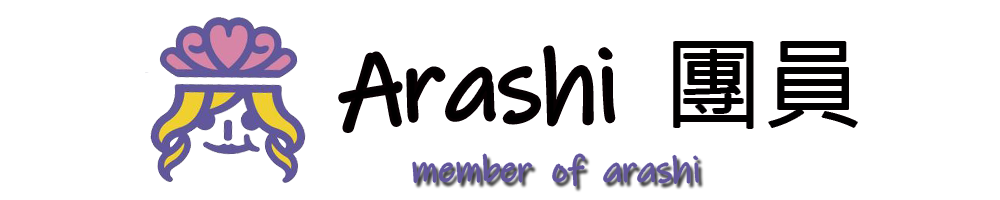
<style>
.page{position:relative;width:1000px;height:200px;background:#ffffff}
.page>*{position:absolute;margin:0}
.t1{font:100px "InkFree";color:#000000}
.t2{font:100px "MicrosoftJhengHeiRegular";color:#000000}
.t3{font:36px "InkFree";color:#64569a}
</style>
<div class="page">
<p class="t1" style="left:341px;top:48px;width:272px;height:82px">Arashi</p>
<p class="t2" style="left:674px;top:42px;width:183px;height:86px">團員</p>
<p class="t3" style="left:413px;top:154px;width:286px;height:32px">member  of  arashi</p>
</div>
